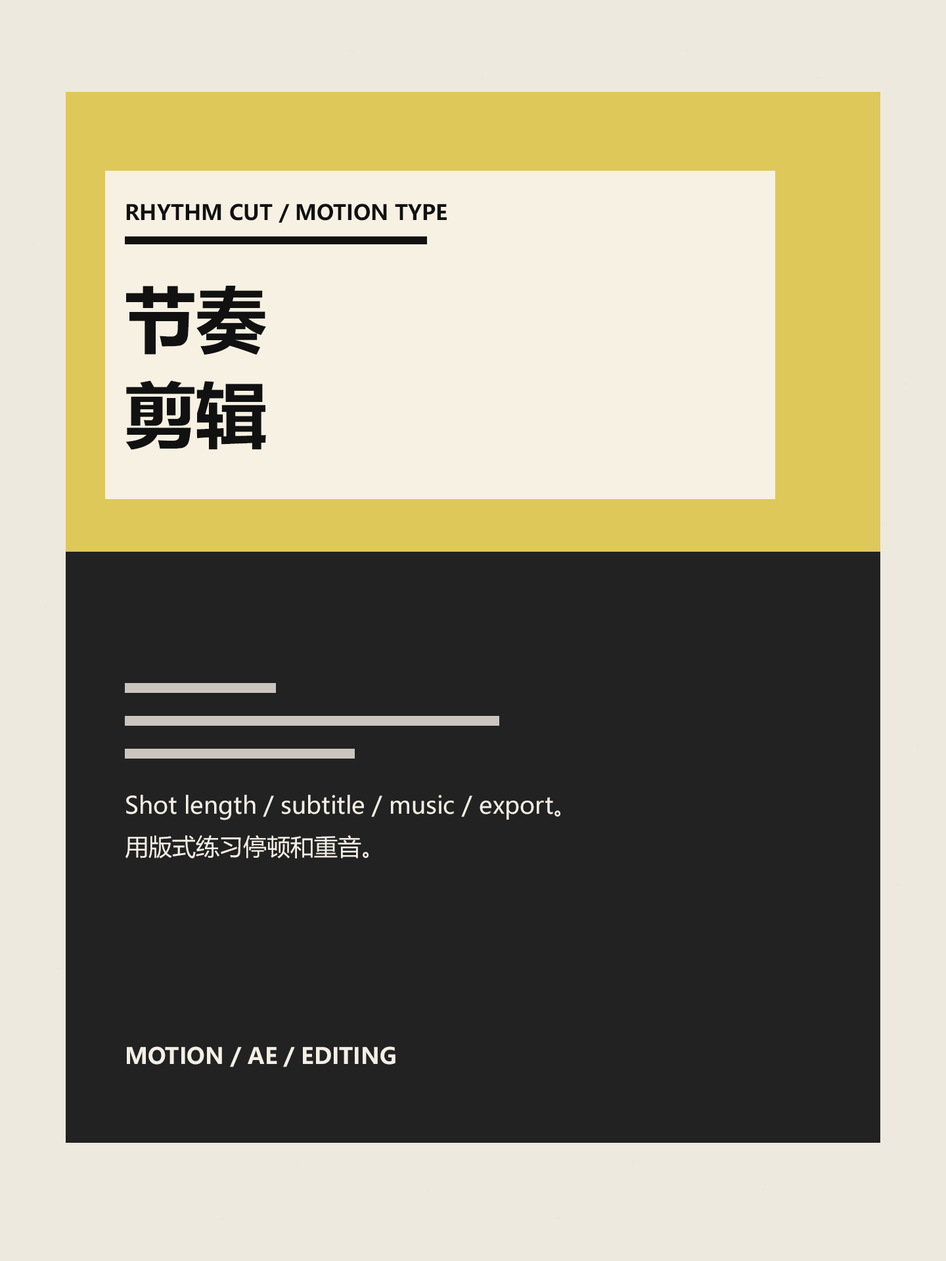
<style>
.page{position:relative;width:946px;height:1261px;background:#222222}
.page>*{position:absolute;margin:0}
.t1{font:21px "MicrosoftYaHeiUI-Bold";color:#111111}
.t2{font:70.9px "MicrosoftYaHeiUI-Bold";color:#111111}
.t3{font:23.6px "MicrosoftYaHeiUI";color:#f4efe6}
.t4{font:22.3px "MicrosoftYaHeiUI-Bold";color:#f4efe6}
</style>
<div class="page">
<p class="t1" style="left:126px;top:204px;width:321px;height:19px">RHYTHM CUT / MOTION TYPE</p>
<p class="t2" style="left:126px;top:286px;width:140px;height:69px">节奏</p>
<p class="t2" style="left:125px;top:380px;width:141px;height:70px">剪辑</p>
<p class="t3" style="left:125px;top:795px;width:435px;height:63px">Shot length / subtitle / music / export。<br>用版式练习停顿和重音。</p>
<p class="t4" style="left:127px;top:1046px;width:268px;height:21px">MOTION / AE / EDITING</p>
</div>
